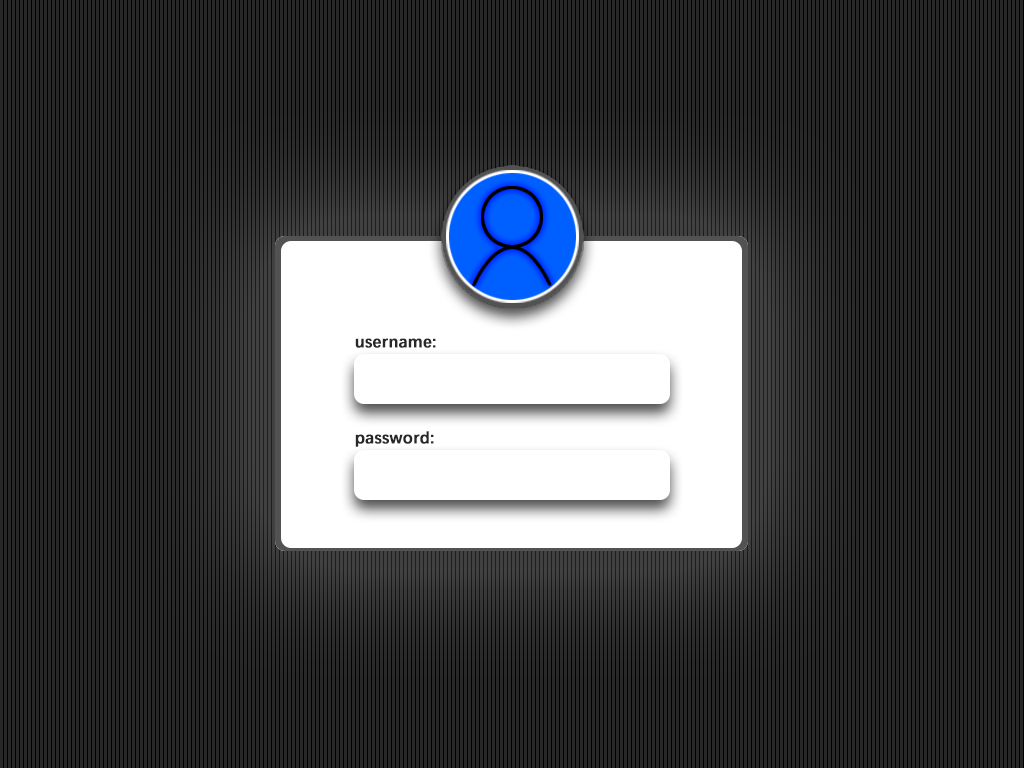
<style>
.page{position:relative;width:1024px;height:768px;background:#282828}
.page>*{position:absolute;margin:0}
.t1{font:16.7px "DengXian-Bold";color:#282828;font-weight:bold}
</style>
<div class="page">
<p class="t1" style="left:355px;top:338px;width:81px;height:10px">username:</p>
<p class="t1" style="left:355px;top:431px;width:79px;height:16px">password:</p>
</div>
